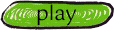
<style>
.page{position:relative;width:114px;height:30px}
.page>*{position:absolute;margin:0}
.t1{font:20px "Gotu-Regular";color:#000000}
</style>
<div class="page">
<p class="t1" style="left:37px;top:4px;width:39px;height:22px">play</p>
</div>
